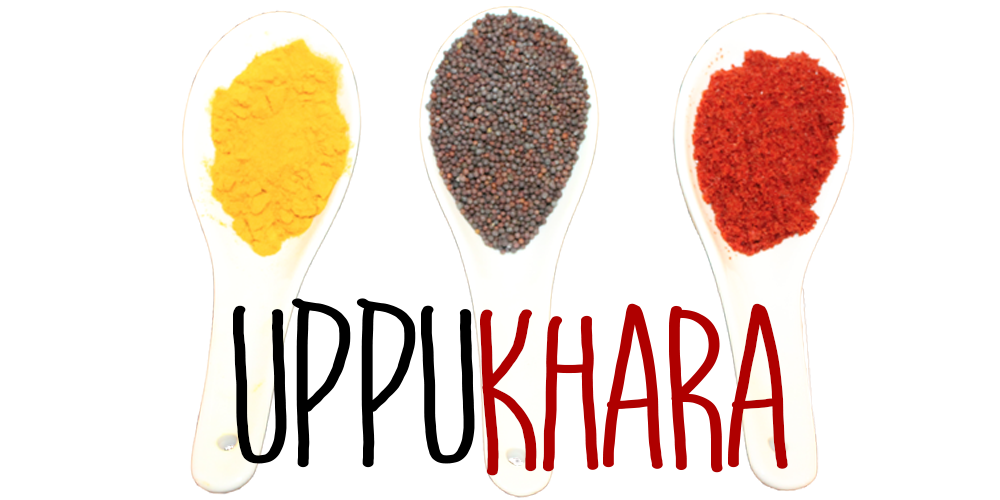
<style>
.page{position:relative;width:1000px;height:500px;background:#ffffff}
.page>*{position:absolute;margin:0}
.t1{font:223.2px "Bite___Bullet";letter-spacing:-0.08em;color:#af0000;scale:1.34 1}
.t2{font:223.2px "Bite___Bullet";letter-spacing:-0.08em;color:#000000;scale:1.34 1}
</style>
<div class="page">
<p class="t1" style="left:233px;top:298px;width:555px;height:178px"><span class="t2">uppu</span>khara</p>
</div>
